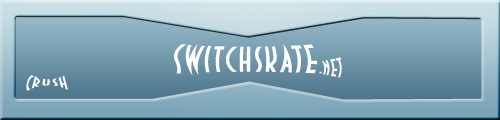
<style>
.page{position:relative;width:500px;height:120px}
.page>*{position:absolute;margin:0}
.t1{font:42px "DecoTechTL";letter-spacing:0.05em;color:#ffffff;scale:0.83 1}
.t2{font:21.6px "DecoTechTL";letter-spacing:0.05em;color:#ffffff;scale:0.83 1}
.t3{font:28.8px "DecoTechTL";letter-spacing:0.05em;color:#ffffff;scale:0.83 1}
</style>
<div class="page">
<p class="t1" style="left:174px;top:44px;width:143px;height:31px">SwitchSkate</p>
<p class="t2" style="left:319px;top:57px;width:23px;height:21px">.net</p>
<p class="t3" style="left:26px;top:75px;width:42px;height:16px">Crush</p>
</div>
